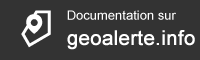
<style>
.page{position:relative;width:200px;height:60px;background:#333333}
.page>*{position:absolute;margin:0}
.t1{font:13px/25px "ArialMT";color:#ffffff}
.t2{font:20px/25px "ArialMT";color:#ffffff;font-weight:bold}
</style>
<div class="page">
<p class="t1" style="left:67px;top:10px;width:128px;height:40px">Documentation sur<br><span class="t2">geoalerte.info</span></p>
</div>
